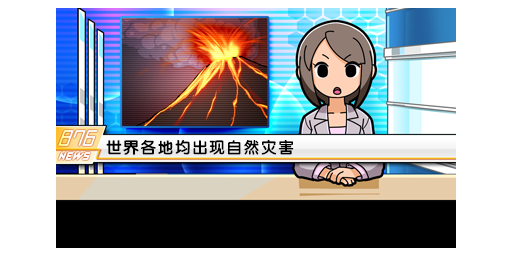
<style>
.page{position:relative;width:512px;height:256px;background:#ffffff}
.page>*{position:absolute;margin:0}
.t1{font:16px "FZY4K--GBK1-0";letter-spacing:0.075em;color:#000000}
</style>
<div class="page">
<p class="t1" style="left:106px;top:139px;width:188px;height:16px">世界各地均出现自然灾害</p>
</div>
